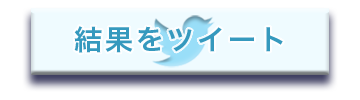
<style>
.page{position:relative;width:360px;height:100px;background:#effbff}
.page>*{position:absolute;margin:0}
.t1{font:28px "HiraKakuPro-W6";letter-spacing:0.1em;color:#3599be}
</style>
<div class="page">
<p class="t1" style="left:74px;top:26px;width:209px;height:27px">結果をツイート</p>
</div>
